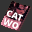
<style>
.page{position:relative;width:32px;height:32px;background:#333333}
.page>*{position:absolute;margin:0}
.t1{font:8.9px/9px "OpenSans-Extrabold";color:#ffffff}
</style>
<div class="page">
<p class="t1" style="left:3px;top:10px;width:21px;height:19px;rotate:21deg">CAT<br>WO</p>
</div>
